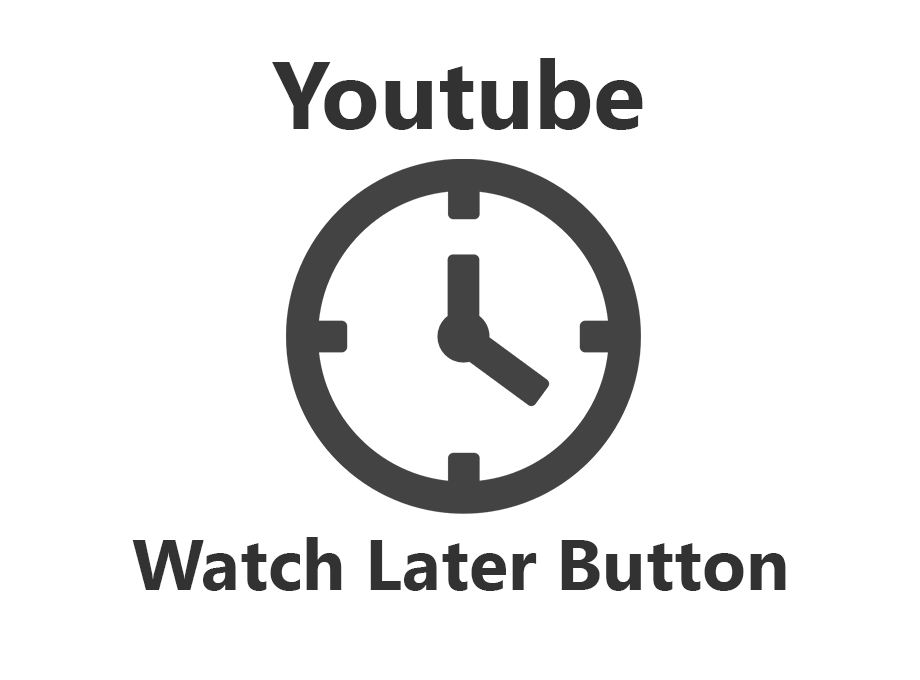
<style>
.page{position:relative;width:920px;height:680px;background:#ffffff}
.page>*{position:absolute;margin:0}
.t1{font:96px "SegoeUI-Bold";color:#323232}
.t2{font:72px "SegoeUI-Bold";color:#323232}
</style>
<div class="page">
<p class="t1" style="left:272px;top:58px;width:371px;height:72px">Youtube</p>
<p class="t2" style="left:132px;top:537px;width:654px;height:54px">Watch Later Button</p>
</div>
